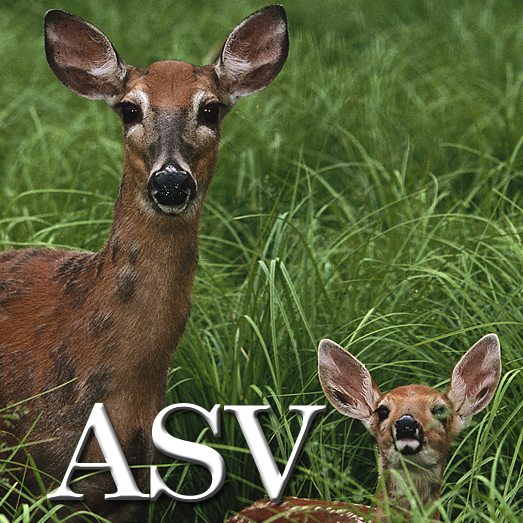
<style>
.page{position:relative;width:523px;height:523px}
.page>*{position:absolute;margin:0}
.t1{font:130.8px "CenturySchoolbook-Bold";letter-spacing:-0.04em;color:#ffffff}
</style>
<div class="page">
<p class="t1" style="left:47px;top:403px;width:279px;height:100px">ASV</p>
</div>
